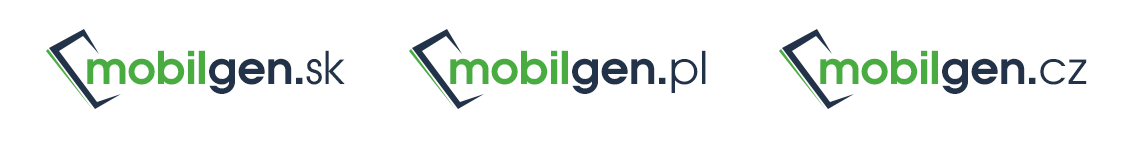
<style>
.page{position:relative;width:1134px;height:142px;background:#ffffff}
.page>*{position:absolute;margin:0}
.t1{font:45px "Atlanta-Demi";color:#48ac40}
.t2{font:45px "Atlanta-Demi";color:#213249}
.t3{font:45px "Atlanta-Book";color:#213249}
</style>
<div class="page">
<p class="t1" style="left:87px;top:50px;width:258px;height:44px">mobil<span class="t2">gen.</span><span class="t3">sk</span></p>
<p class="t1" style="left:450px;top:50px;width:256px;height:44px">mobil<span class="t2">gen.</span><span class="t3">pl</span></p>
<p class="t1" style="left:820px;top:50px;width:267px;height:44px">mobil<span class="t2">gen.</span><span class="t3">cz</span></p>
</div>
